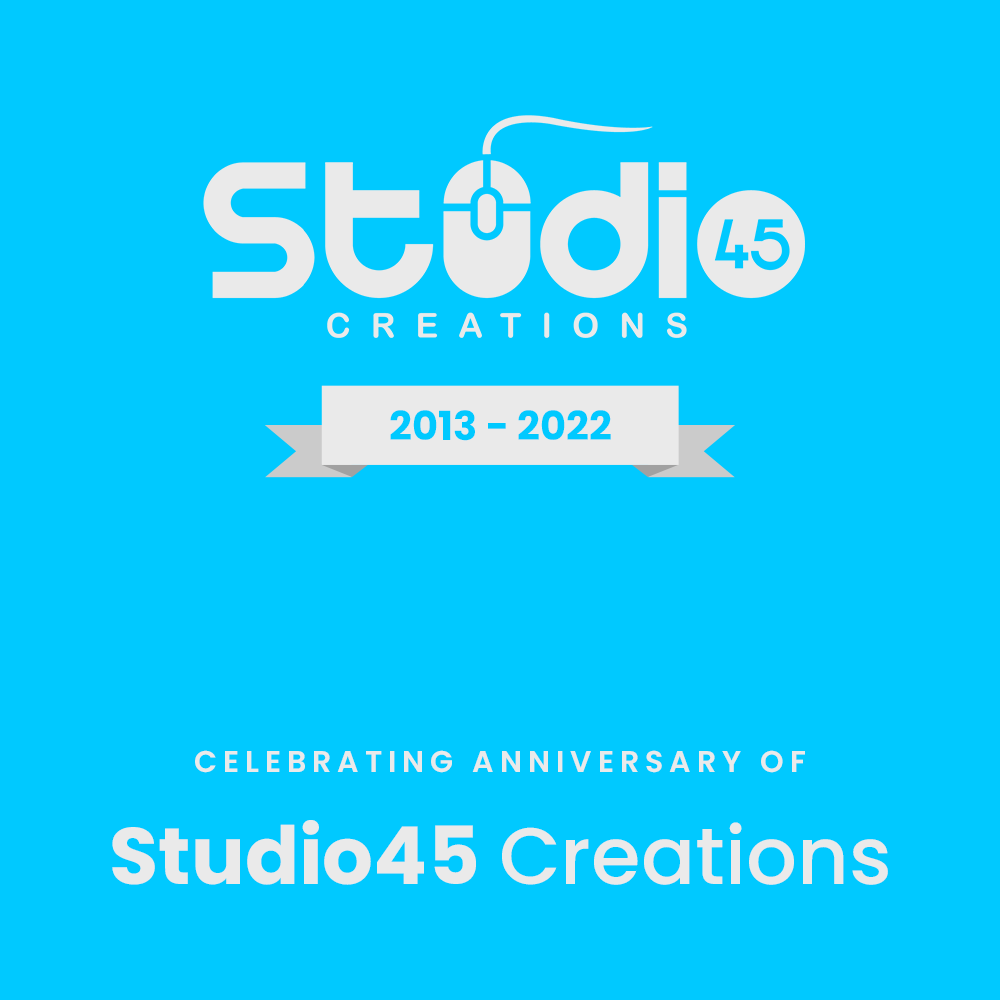
<style>
.page{position:relative;width:1000px;height:1000px;background:#00c9ff}
.page>*{position:absolute;margin:0}
.t1{font:40px "Poppins-Bold";color:#00c9ff}
.t2{font:30px "Poppins-SemiBold";letter-spacing:0.2em;color:#eaeaea;text-transform:uppercase}
.t3{font:80px "Poppins-Medium";color:#eaeaea}
.t4{font:80px "Poppins-Bold";color:#eaeaea}
</style>
<div class="page">
<p class="t1" style="left:390px;top:410px;width:221px;height:31px">2013 - 2022</p>
<p class="t2" style="left:195px;top:750px;width:610px;height:23px">Celebrating Anniversary Of</p>
<p class="t3" style="left:112px;top:820px;width:776px;height:65px"><span class="t4">Studio45 </span>Creations</p>
</div>
